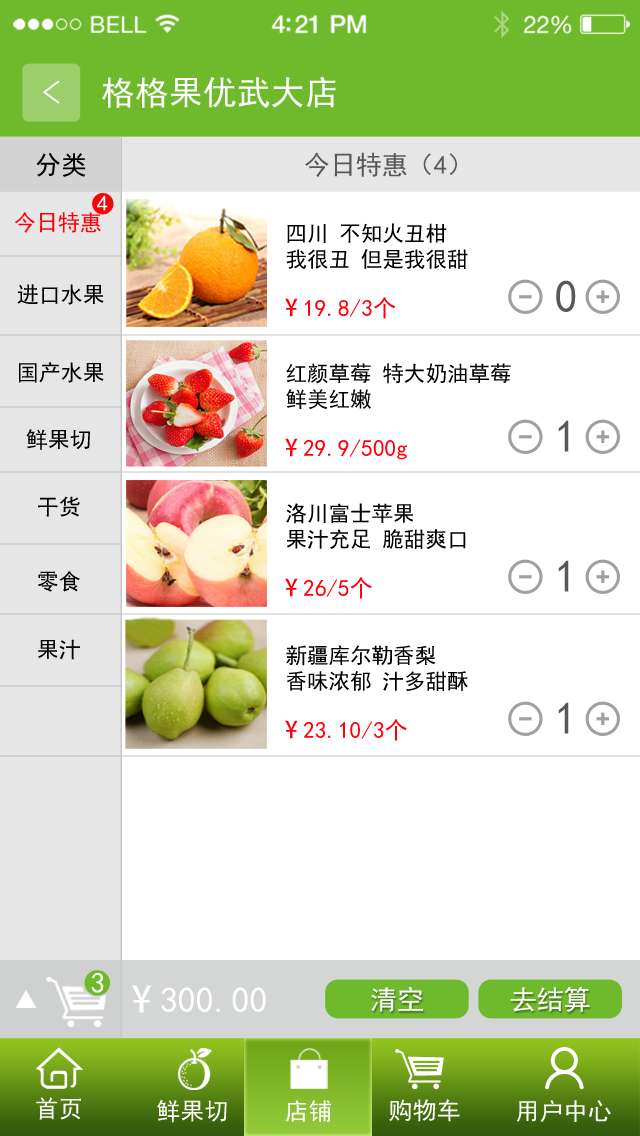
<style>
.page{position:relative;width:640px;height:1136px;background:#ffffff}
.page>*{position:absolute;margin:0}
.t1{font:34px "SimHei";color:#ffffff}
.t2{font:32.3px "SimHei";color:#ffffff;scale:1.23 1}
.t3{font:26px "SimHei";color:#000000}
.t4{font:26px "SimHei";color:#595757}
.t5{font:22px "SimHei";color:#ffffff}
.t6{font:22px "SimHei";color:#fe0007}
.t7{font:21.5px "SimHei";color:#000000}
.t8{font:45.4px "SimHei";color:#595757}
.t9{font:22px "SimHei";color:#000000}
.t10{font:23.3px "SimHei";color:#ff000c}
.t11{font:23.3px "AdobeHeitiStd-Regular";color:#ff000c}
.t12{font:28.8px "SimHei";color:#ffffff}
.t13{font:35.8px "SimHei";color:#ffffff}
.t14{font:35.8px "AdobeHeitiStd-Regular";color:#ffffff}
.t15{font:26.9px "SimHei";color:#ffffff}
.t16{font:24.1px "SimHei";color:#ffffff}
</style>
<div class="page">
<p class="t1" style="left:102px;top:76px;width:234px;height:32px">格格果优武大店</p>
<p class="t2" style="left:42px;top:80px;width:18px;height:24px">&lt;</p>
<p class="t3" style="left:36px;top:153px;width:50px;height:24px">分类</p>
<p class="t4" style="left:305px;top:152px;width:152px;height:25px">今日特惠（4）</p>
<p class="t5" style="left:97px;top:195px;width:11px;height:16px">4</p>
<p class="t6" style="left:15px;top:212px;width:86px;height:21px">今日特惠</p>
<p class="t7" style="left:286px;top:223px;width:182px;height:46px">四川 不知火丑柑<br>我很丑 但是我很甜</p>
<p class="t8" style="left:556px;top:280px;width:20px;height:32px">0</p>
<p class="t9" style="left:17px;top:284px;width:87px;height:21px">进口水果</p>
<p class="t10" style="left:285px;top:297px;width:111px;height:22px"><span class="t11">¥ </span>19.8/3个</p>
<p class="t9" style="left:19px;top:362px;width:85px;height:21px">国产水果</p>
<p class="t7" style="left:286px;top:363px;width:225px;height:46px">红颜草莓 特大奶油草莓<br>鲜美红嫩</p>
<p class="t8" style="left:558px;top:420px;width:11px;height:32px">1</p>
<p class="t9" style="left:26px;top:429px;width:64px;height:21px">鲜果切</p>
<p class="t10" style="left:285px;top:438px;width:122px;height:22px"><span class="t11">¥ </span>29.9/500g</p>
<p class="t9" style="left:38px;top:496px;width:42px;height:21px">干货</p>
<p class="t7" style="left:286px;top:503px;width:180px;height:46px">洛川富士苹果<br>果汁充足 脆甜爽口</p>
<p class="t8" style="left:558px;top:560px;width:11px;height:32px">1</p>
<p class="t9" style="left:38px;top:571px;width:42px;height:21px">零食</p>
<p class="t10" style="left:285px;top:577px;width:87px;height:22px"><span class="t11">¥ </span>26/5个</p>
<p class="t9" style="left:38px;top:639px;width:42px;height:21px">果汁</p>
<p class="t7" style="left:286px;top:645px;width:182px;height:46px">新疆库尔勒香梨<br>香味浓郁 汁多甜酥</p>
<p class="t8" style="left:558px;top:702px;width:11px;height:32px">1</p>
<p class="t10" style="left:285px;top:719px;width:122px;height:22px"><span class="t11">¥ </span>23.10/3个</p>
<p class="t12" style="left:91px;top:973px;width:13px;height:20px">3</p>
<p class="t13" style="left:132px;top:985px;width:134px;height:28px"><span class="t14">¥ </span>300.00</p>
<p class="t15" style="left:371px;top:986px;width:52px;height:26px">清空</p>
<p class="t15" style="left:510px;top:986px;width:80px;height:26px">去结算</p>
<p class="t16" style="left:36px;top:1097px;width:45px;height:23px">首页</p>
<p class="t16" style="left:157px;top:1099px;width:70px;height:24px">鲜果切</p>
<p class="t16" style="left:286px;top:1100px;width:45px;height:22px">店铺</p>
<p class="t16" style="left:389px;top:1099px;width:71px;height:23px">购物车</p>
<p class="t16" style="left:516px;top:1100px;width:95px;height:22px">用户中心</p>
</div>
